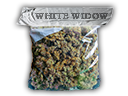
<style>
.page{position:relative;width:128px;height:96px;background:#ffffff}
.page>*{position:absolute;margin:0}
.t1{font:9.2px "Centaur";letter-spacing:0.08em;color:#6b6c6d}
</style>
<div class="page">
<p class="t1" style="left:35px;top:13px;width:73px;height:6px">WHITE WIDOW</p>
<p class="t1" style="left:35px;top:13px;width:73px;height:6px">WHITE WIDOW</p>
</div>
